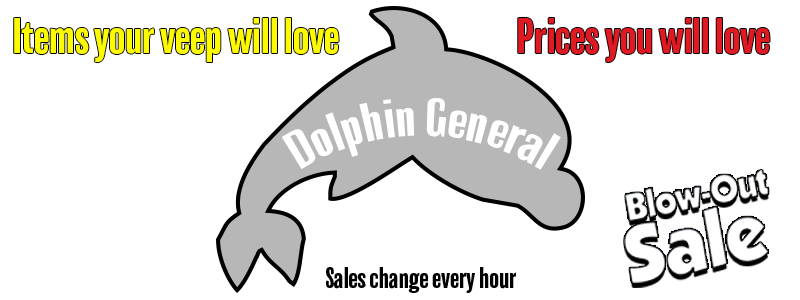
<style>
.page{position:relative;width:800px;height:300px;background:#ffffff}
.page>*{position:absolute;margin:0}
.t1{font:45.8px "Balboa-Condensed";color:#fdfb00}
.t2{font:45.8px "Balboa-Condensed";color:#df1a23}
.t3{font:50.7px "Balboa-Condensed";color:#ffffff}
.t4{font:27.4px "Balboa-Condensed";color:#000000}
</style>
<div class="page">
<p class="t1" style="left:14px;top:18px;width:325px;height:44px">Items your veep will love</p>
<p class="t2" style="left:518px;top:18px;width:252px;height:44px">Prices you will love</p>
<p class="t3" style="left:281px;top:98px;width:280px;height:72px">Dolphin General</p>
<p class="t4" style="left:326px;top:267px;width:191px;height:26px">Sales change every hour</p>
</div>
